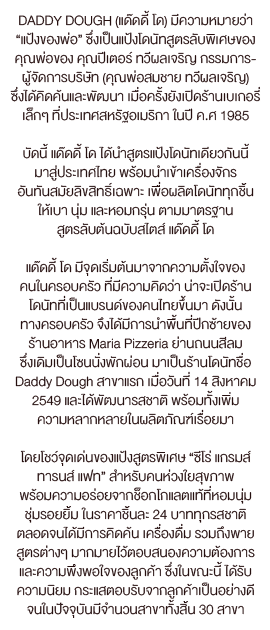
<style>
.page{position:relative;width:270px;height:630px;background:#ffffff}
.page>*{position:absolute;margin:0}
.t1{font:19px/19px "DBHelvethaicaX-45Li";letter-spacing:0.005em;color:#250f0f}
</style>
<div class="page">
<p class="t1" style="left:10px;top:10px;width:250px;height:608px;text-align:center">DADDY DOUGH (แด๊ดดี้ โด) มีความหมายว่า<br>“แป้งของพ่อ” ซึ่งเป็นแป้งโดนัทสูตรลับพิเศษของ<br>คุณพ่อของ คุณปีเตอร์ ทวีผลเจริญ กรรมการ-<br>ผู้จัดการบริษัท (คุณพ่อสมชาย ทวีผลเจริญ)<br>ซึ่งได้คิดค้นและพัฒนา เมื่อครั้งยังเปิดร้านเบเกอรี่<br>เล็กๆ ที่ประเทศสหรัฐอเมริกา ในปี ค.ศ 1985<br><br>บัดนี้ แด๊ดดี้ โด ได้นำสูตรแป้งโดนัทเดียวกันนี้<br>มาสู่ประเทศไทย พร้อมนำเข้าเครื่องจักร<br>อันทันสมัยลิขสิทธิ์เฉพาะ เพื่อผลิตโดนัททุกชิ้น<br>ให้เบา นุ่ม และหอมกรุ่น ตามมาตรฐาน<br>สูตรลับต้นฉบับสไตส์ แด๊ดดี้ โด<br><br>แด๊ดดี้ โด มีจุดเริ่มต้นมาจากความตั้งใจของ<br>คนในครอบครัว ที่มีความคิดว่า น่าจะเปิดร้าน<br>โดนัทที่เป็นแบรนด์ของคนไทยขึ้นมา ดังนั้น<br>ทางครอบครัว จึงได้มีการนำพื้นที่ปีกซ้ายของ<br>ร้านอาหาร Maria Pizzeria ย่านถนนสีลม<br>ซึ่งเดิมเป็นโซนนั่งพักผ่อน มาเป็นร้านโดนัทชื่อ<br>Daddy Dough สาขาแรก เมื่อวันที่ 14 สิงหาคม<br>2549 และได้พัฒนารสชาติ พร้อมทั้งเพิ่ม<br>ความหลากหลายในผลิตภัณฑ์เรื่อยมา<br><br>โดยโชว์จุดเด่นของแป้งสูตรพิเศษ “ซีโร่ แกรมส์<br>ทารนส์ แฟท” สำหรับคนห่วงใยสุขภาพ<br>พร้อมความอร่อยจากช็อกโกแลตแท้ที่หอมนุ่ม<br>ชุ่มรอยยิ้ม ในราคาชิ้นละ 24 บาททุกรสชาติ<br>ตลอดจนได้มีการคิดค้น เครื่องดื่ม รวมถึงพาย<br>สูตรต่างๆ มากมายไว้ตอบสนองความต้องการ<br>และความพึงพอใจของลูกค้า ซึ่งในขณะนี้ ได้รับ<br>ความนิยม กระแสตอบรับจากลูกค้าเป็นอย่างดี<br>จนในปัจจุบันมีจำนวนสาขาทั้งสิ้น 30 สาขา</p>
</div>
